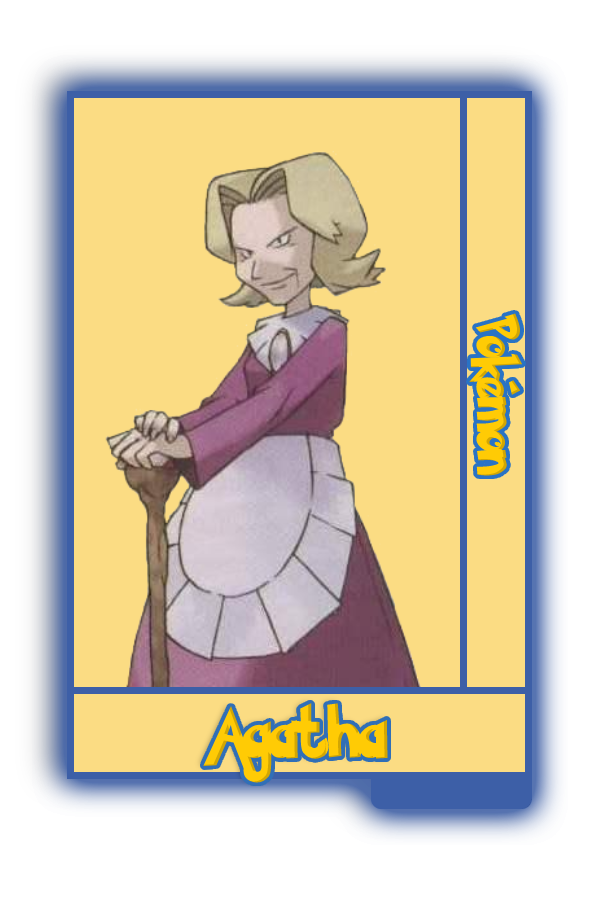
<style>
.page{position:relative;width:600px;height:900px;background:#fbdc83}
.page>*{position:absolute;margin:0}
.t1{font:48.8px "PokemonSolidNormal";color:#ffcb05;scale:0.8 1}
.t2{font:56.6px "PokemonSolidNormal";color:#ffcb05;scale:0.92 1}
</style>
<div class="page">
<p class="t1" style="left:469px;top:313px;width:54px;height:163px;rotate:90deg">Pokémon</p>
<p class="t2" style="left:203px;top:703px;width:185px;height:80px">Agatha</p>
</div>
